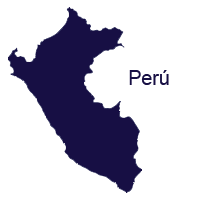
<style>
.page{position:relative;width:200px;height:200px;background:#ffffff}
.page>*{position:absolute;margin:0}
.t1{font:20.8px "ArialMT";color:#170f44;scale:0.94 1}
</style>
<div class="page">
<p class="t1" style="left:129px;top:70px;width:40px;height:15px">Perú</p>
</div>
